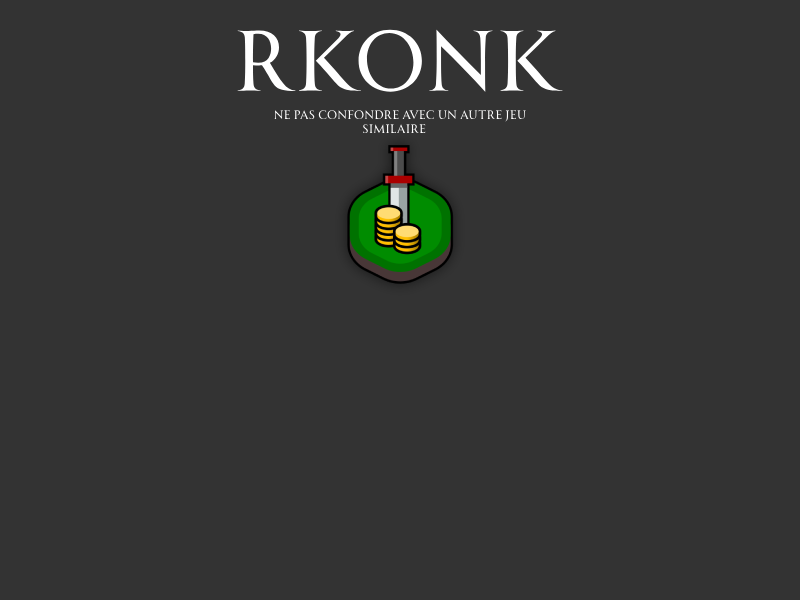
<style>
.page{position:relative;width:800px;height:600px;background:#333333}
.page>*{position:absolute;margin:0}
.t1{font:84px "AllrounderMonumentTest-Regular";color:#ffffff}
.t2{font:12px "AllrounderMonumentTest-Regular";color:#ffffff}
</style>
<div class="page">
<p class="t1" style="left:237px;top:29px;width:326px;height:63px">RKONK</p>
<p class="t2" style="left:274px;top:110px;width:252px;height:24px;text-align:center">(Ne pas confondre avec un autre jeu similaire)</p>
</div>
